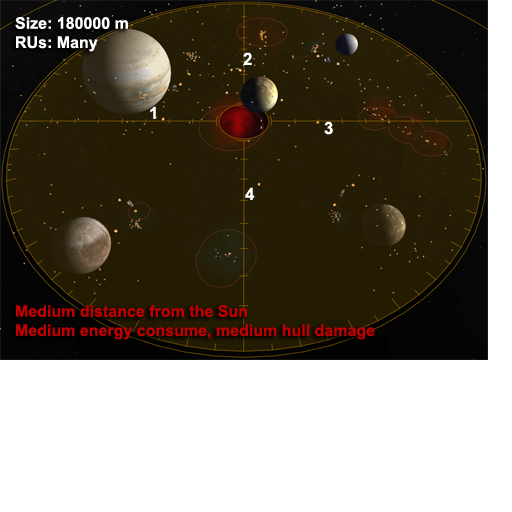
<style>
.page{position:relative;width:512px;height:512px;background:#ffffff}
.page>*{position:absolute;margin:0}
.t1{font:16px "Arial-BoldMT";color:#be0000}
.t2{font:16px "Arial-BoldMT";color:#ffffff}
.t3{font:17px "Arial-BoldMT";color:#ffffff}
</style>
<div class="page">
<p class="t1" style="left:15px;top:17px;width:360px;height:323px"><span class="t2">Size: 180000 m<br>RUs: Many<br><br><br><br><br><br><br><br><br><br><br><br><br><br></span>Medium distance from the Sun<br>Medium energy consume, medium hull damage</p>
<p class="t3" style="left:243px;top:52px;width:9px;height:13px">2</p>
<p class="t3" style="left:150px;top:106px;width:6px;height:13px">1</p>
<p class="t3" style="left:324px;top:121px;width:9px;height:14px">3</p>
<p class="t3" style="left:245px;top:187px;width:10px;height:13px">4</p>
</div>
